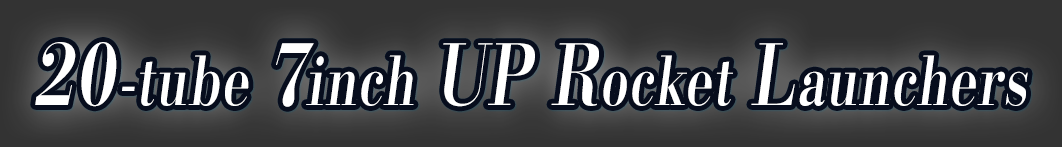
<style>
.page{position:relative;width:1062px;height:147px}
.page>*{position:absolute;margin:0}
.t1{font:67.2px "KochoStd-Heavy";letter-spacing:0.03em;color:#ffffff;font-style:italic;scale:0.75 1}
.t2{font:84px "KochoStd-Heavy";letter-spacing:0.03em;color:#ffffff;font-style:italic;scale:0.75 1}
</style>
<div class="page">
<p class="t1" style="left:35px;top:42px;width:993px;height:65px"><span class="t2">20</span>-tube <span class="t2">7</span>inch <span class="t2">UP R</span>ocket <span class="t2">L</span>aunchers</p>
</div>
